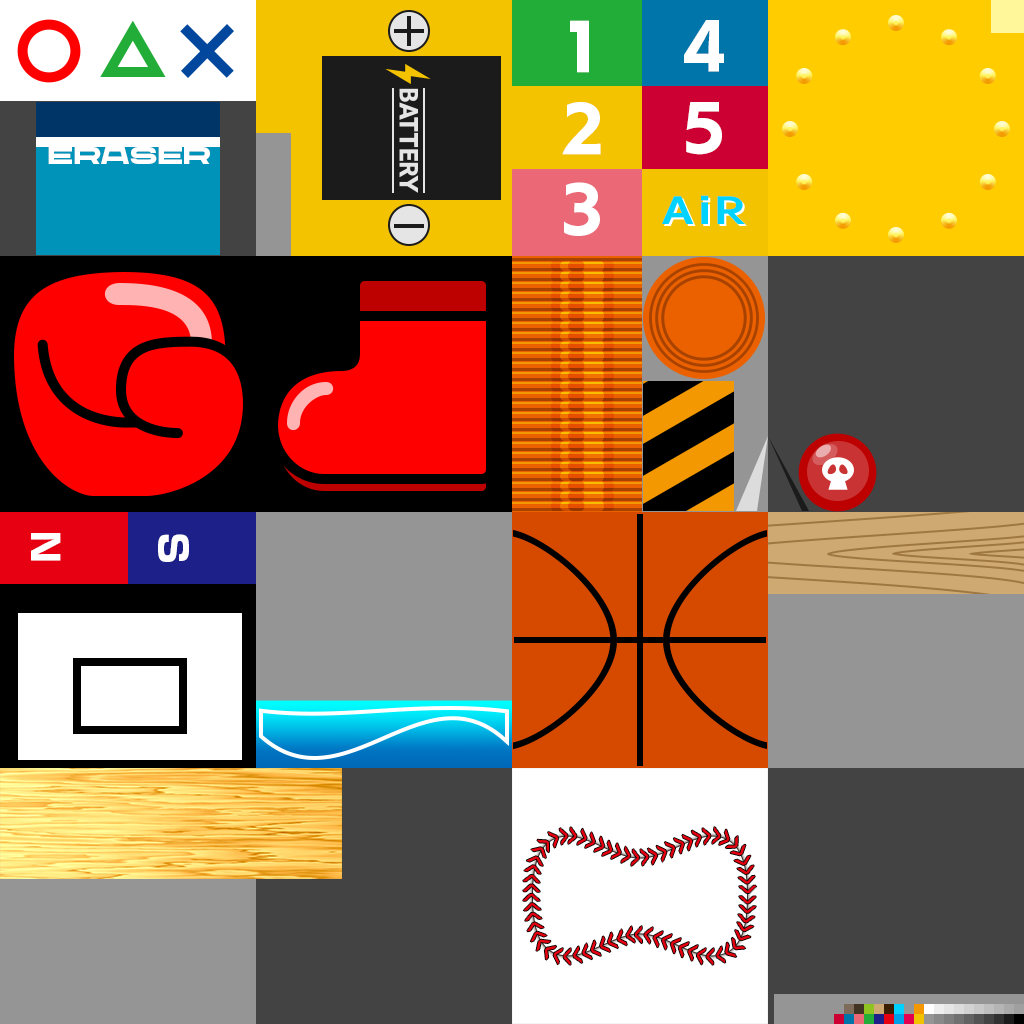
<style>
.page{position:relative;width:1024px;height:1024px}
.page>*{position:absolute;margin:0}
.t1{font:60px "UDKakugo_SmallPr6N-HV";color:#ffffff}
.t2{font:24px "CHANEY-UltraExtended";color:#ffffff}
.t3{font:36px "FOTFWHindi-B";letter-spacing:0.1em;color:#00d2ff;scale:1.31 1}
.t4{font:36px "NewRodinProN-EB";letter-spacing:0.1em;color:#ffffff}
.t5{font:26.6px "NewRodinPro-DB";letter-spacing:0.16em;color:#e60012;scale:0.46 1}
</style>
<div class="page">
<p class="t1" style="left:570px;top:20px;width:19px;height:53px">1</p>
<p class="t1" style="left:684px;top:20px;width:40px;height:52px">4</p>
<p class="t1" style="left:562px;top:102px;width:39px;height:53px">2</p>
<p class="t1" style="left:686px;top:102px;width:36px;height:53px">5</p>
<p class="t2" style="left:48px;top:147px;width:162px;height:17px">Eraser</p>
<p class="t1" style="left:564px;top:182px;width:36px;height:54px">3</p>
<p class="t3" style="left:662px;top:195px;width:83px;height:29px">AiR</p>
<p class="t4" style="left:31px;top:533px;width:30px;height:28px;rotate:90deg">N</p>
<p class="t4" style="left:158px;top:534px;width:31px;height:28px;rotate:90deg">S</p>
<p class="t5" style="left:523px;top:827px;width:234px;height:138px">&gt;&gt;&gt;&gt;&gt;&gt;&gt;&gt;&gt;&gt;&gt;&gt;&gt;&gt;&gt;&gt;&gt;&gt;&gt;&gt;&gt;&gt;&gt;&gt;&gt;&gt;&gt;&gt;&gt;&gt;&gt;&gt;&gt;&gt;&gt;&gt;&gt;&gt;&gt;&gt;&gt;&gt;&gt;&gt;&gt;&gt;&gt;&gt;&gt;&gt;&gt;&gt;&gt;&gt;&gt;&gt;&gt;&gt;&gt;&gt;&gt;&gt;&gt;&gt;&gt;&gt;&gt;&gt;&gt;&gt;&gt;&gt;&gt;&gt;&gt;&gt;&gt;&gt;&gt;&gt;&gt;&gt;&gt;&gt;&gt;&gt;&gt;&gt;&gt;&gt;&gt;&gt;&gt;&gt;&gt;&gt;&gt;&gt;&gt;&gt;&gt;&gt;&gt;&gt;&gt;&gt;&gt;&gt;&gt;&gt;&gt;&gt;&gt;&gt;&gt;&gt;&gt;&gt;&gt;&gt;&gt;</p>
</div>
